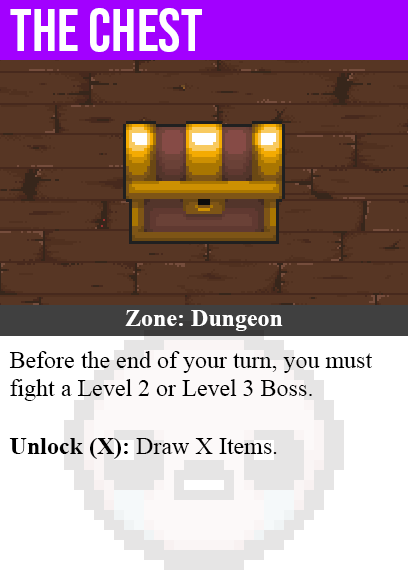
<style>
.page{position:relative;width:408px;height:585px;background:#573624}
.page>*{position:absolute;margin:0}
.t1{font:60px "BebasNeue-Regular";color:#ffffff}
.t2{font:24px "TimesNewRomanPS-BoldMT";color:#ffffff}
.t3{font:24px "TimesNewRomanPSMT";color:#000000}
.t4{font:24px "TimesNewRomanPS-BoldMT";color:#000000}
</style>
<div class="page">
<p class="t1" style="left:10px;top:8px;width:192px;height:44px">the chest</p>
<p class="t2" style="left:125px;top:310px;width:158px;height:21px">Zone: Dungeon</p>
<p class="t3" style="left:9px;top:351px;width:363px;height:108px">Before the end of your turn, you must<br>fight a Level 2 or Level 3 Boss.<br><br><span class="t4">Unlock (X):</span> Draw X Items.</p>
</div>
